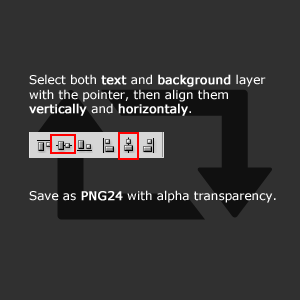
<style>
.page{position:relative;width:300px;height:300px;background:#303030}
.page>*{position:absolute;margin:0}
.t1{font:12px "Verdana";color:#ffffff}
.t2{font:12px "Verdana";color:#ffffff;font-weight:bold}
</style>
<div class="page">
<p class="t1" style="left:29px;top:74px;width:247px;height:129px">Select both <span class="t2">text </span>and <span class="t2">background </span>layer <br>with the pointer, then align them<br><span class="t2">vertically </span>and <span class="t2">horizontaly</span>.<br><br><br><br><br><br>Save as <span class="t2">PNG24</span> with alpha transparency.</p>
</div>
